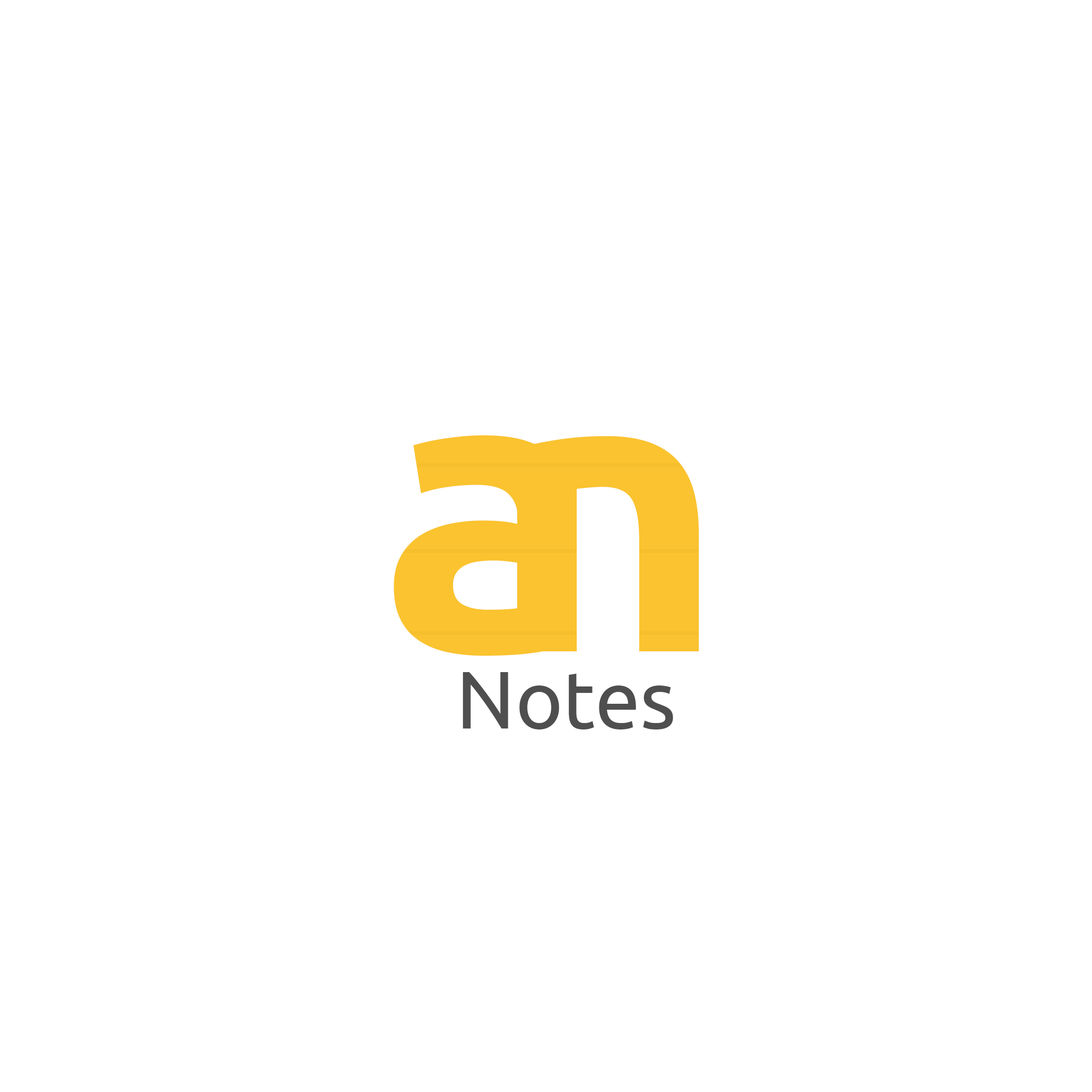
<style>
.page{position:relative;width:1092px;height:1092px;background:#ffffff}
.page>*{position:absolute;margin:0}
.t1{font:400px "Ubuntu-Bold";letter-spacing:-0.28em;color:#fac32f}
.t2{font:81.1px "Ubuntu";color:#4f4f4f}
</style>
<div class="page">
<p class="t1" style="left:394px;top:435px;width:305px;height:221px">an</p>
<p class="t2" style="left:463px;top:672px;width:210px;height:57px">Notes</p>
</div>
